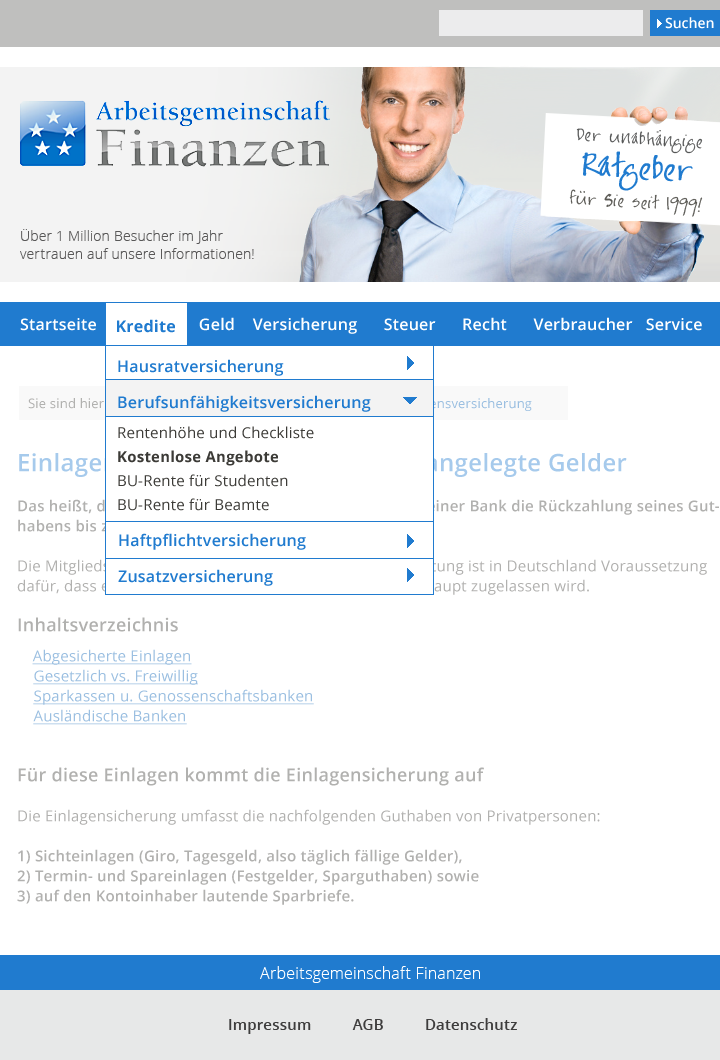
<style>
.page{position:relative;width:720px;height:1060px;background:#ffffff}
.page>*{position:absolute;margin:0}
.t1{font:14px "OpenSans-Semibold";color:#ffffff}
.t2{font:14px/30px "JaynePrint-Hand";letter-spacing:0.05em;color:#595853}
.t3{font:14px/34px "JaynePrint-Hand";letter-spacing:0.075em;color:#565757}
.t4{font:26px/34px "JaynePrint-Hand";letter-spacing:0.015em;color:#207bcf;font-weight:bold}
.t5{font:14px/18px "OpenSans-Light";letter-spacing:0.015em;color:#595858}
.t6{font:16px "OpenSans-Semibold";letter-spacing:0.015em;color:#ffffff}
.t7{font:16px "OpenSans-Bold";letter-spacing:0.015em;color:#207bcf}
.t8{font:16px/36px "OpenSans-Semibold";letter-spacing:0.015em;color:#207bcf}
.t9{font:13px "OpenSans";letter-spacing:0.015em}
.t10{font:15px/24px "OpenSans";letter-spacing:0.015em;color:#3c3b37}
.t11{font:15px/24px "OpenSans-Bold";letter-spacing:0.015em;color:#3c3b37}
.t12{font:14px/20px "OpenSans";letter-spacing:0.015em}
.t13{font:24px/20px "OpenSans-Semibold";letter-spacing:0.015em}
.t14{font:15px/20px "OpenSans-Semibold";letter-spacing:0.015em}
.t15{font:15px/20px "OpenSans";letter-spacing:0.015em}
.t16{font:18px/20px "OpenSans-Semibold";letter-spacing:0.015em}
.t17{font:18px/10px "OpenSans-Semibold";letter-spacing:0.015em}
.t18{font:15px/20px "OpenSans";letter-spacing:0.015em;text-decoration:underline}
.t19{font:16px "OpenSans-Light";letter-spacing:0.015em;color:#ffffff}
.t20{font:15px "OpenSans-Semibold";letter-spacing:0.015em;color:#3e3d3d}
</style>
<div class="page">
<p class="t1" style="left:665px;top:17px;width:49px;height:12px">Suchen</p>
<p class="t2" style="left:569px;top:128px;width:134px;height:89px;text-align:center;rotate:3deg"><span class="t3">Der unabhangige<br></span><span class="t4">Ratgeber<br></span>fur Sie seit 1999!</p>
<p class="t5" style="left:20px;top:229px;width:234px;height:30px">Über 1 Million Besucher im Jahr <br>vertrauen auf unsere Informationen!</p>
<p class="t6" style="left:20px;top:317px;width:682px;height:17px">Startseite     Kredite     Geld    Versicherung      Steuer      Recht      Verbraucher   Service</p>
<p class="t7" style="left:117px;top:319px;width:58px;height:14px">Kredite</p>
<p class="t8" style="left:118px;top:359px;width:253px;height:53px">Hausratversicherung<br>Berufsunfähigkeitsversicherung</p>
<p class="t9" style="left:28px;top:398px;width:504px;height:13px">Sie sind hier:  &gt; Startseite &gt; Lebensversicherung &gt; Beleihung Lebensversicherung</p>
<p class="t10" style="left:118px;top:426px;width:196px;height:85px">Rentenhöhe und Checkliste<br><span class="t11">Kostenlose Angebote<br></span>BU-Rente für Studenten<br>BU-Rente für Beamte</p>
<p class="t12" style="left:17px;top:453px;width:702px;height:452px"><span class="t13">Einlagensicherung - Sicherheit für angelegte Gelder     <br><br></span><span class="t14">Das heißt, der Kunde bekommt im Falle der Insolvenz seiner Bank die Rückzahlung seines Guthabens bis zu diesem Betrag garantiert.<br></span><span class="t15"><br>Die Mitgliedschaft in einer solchen Entschädigungseinrichtung ist in Deutschland Voraussetzung dafür, dass ein Finanzinstitut zum Geschäftsbetrieb überhaupt zugelassen wird.<br><br></span><span class="t16">Inhaltsverzeichni</span><span class="t17">s<br>  <br>    </span><span class="t18">Abgesicherte Einlagen<br>    Gesetzlich vs. Freiwillig<br>    Sparkassen u. Genossenschaftsbanken<br>    Ausländische Banken<br><br><br></span><span class="t16">Für diese Einlagen kommt die Einlagensicherung auf<br><br></span><span class="t15">Die Einlagensicherung umfasst die nachfolgenden Guthaben von Privatpersonen:<br><br></span><span class="t14">1) Sichteinlagen (Giro, Tagesgeld, also täglich fällige Gelder),<br>2) Termin- und Spareinlagen (Festgelder, Sparguthaben) sowie<br>3) auf den Kontoinhaber lautende Sparbriefe.<br></span><span class="t15"><br>Achtung: Zertifikate fallen nicht unter die Einlagensicherung!<br>Ein Beispiel sind hier die großen Verluste, die die deutschen Anleger mit Zertifikaten der in die Insolvenz gegangenen US-Investmentbank Lehman Brothers gemacht haben. Sobald der Herausgeber solcher Papiere zahlungsunfähig ist, sind auch die von ihm ausgegebenen Zertifikate wertlos.<br>Unterschiede gesetzliche und freiwillige Einlagensicherung<br></span><br>Unterscheidung zwischen gesetzlich festgelegter Einlagensicherung und freiwilligem Einlagensicherungsfonds:<br>Gesetzliche Einlagensicherung<br><br>Das Einlagensicherungs- und Anlegerentschädigungsgesetz (EAEG) trat am 1. August 1998 in Kraft. Seit Anfang 2011 garantiert die Entschädigungseinrichtung deutschen Banken den gesetzlich vorgeschriebenen Schutz von 100.000 Euro sowie eine Auszahlungsfrist von maximal 30 Arbeitstagen.<br>Freiwillige Einlagensicherung<br><br>Für private Banken sichert der Einlagensicherungsfonds des Bundesverbands Deutscher Banken das Guthaben jedes einzelnen Kunden bis zur Höhe von 30 Prozent des haftenden Eigenkapitals der jeweiligen Bank. Hierfür ist der letzte veröffentlichte Jahresabschluss der Bank maßgeblich.<br><br>Diese Haftungsgrenze reduziert sich ab 2015 auf 20 Prozent, ab 2020 auf 15 Prozent und ab 2025 auf 8,75 Prozent. Diesem Verbund, der immer wieder auch als „Feuerwehrfonds“ bezeichnet wird, können sich die Institute auf freiwilliger Basis anschließen. Hier sind viele Privatbanken Mitglied, die entweder deutsche Banken sind oder eine deutsche Niederlassung haben.</p>
<p class="t8" style="left:118px;top:533px;width:188px;height:53px">Haftpflichtversicherung<br>Zusatzversicherung</p>
<p class="t19" style="left:260px;top:966px;width:220px;height:17px">Arbeitsgemeinschaft Finanzen</p>
<p class="t20" style="left:229px;top:1018px;width:288px;height:16px">Impressum          AGB          Datenschutz</p>
</div>
